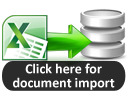
<style>
.page{position:relative;width:128px;height:93px;background:#ffffff}
.page>*{position:absolute;margin:0}
.t1{font:14px/14px "Calibri-Bold";color:#ffffff}
</style>
<div class="page">
<p class="t1" style="left:13px;top:63px;width:102px;height:27px;text-align:center">Click here for document import</p>
</div>
